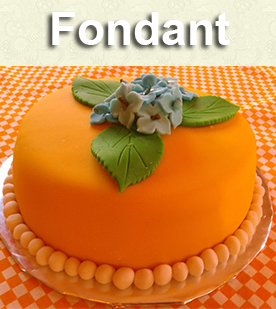
<style>
.page{position:relative;width:276px;height:309px}
.page>*{position:absolute;margin:0}
.t1{font:46px "Arial-BoldMT";color:#ffffff}
</style>
<div class="page">
<p class="t1" style="left:52px;top:12px;width:178px;height:33px">Fondant</p>
</div>
